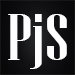
<style>
.page{position:relative;width:75px;height:75px;background:#fffefe}
.page>*{position:absolute;margin:0}
.t1{font:65px "NiagaraSolid-Reg";color:#fffefe;scale:1.3 1}
</style>
<div class="page">
<p class="t1" style="left:8px;top:14px;width:59px;height:55px">PjS</p>
</div>
